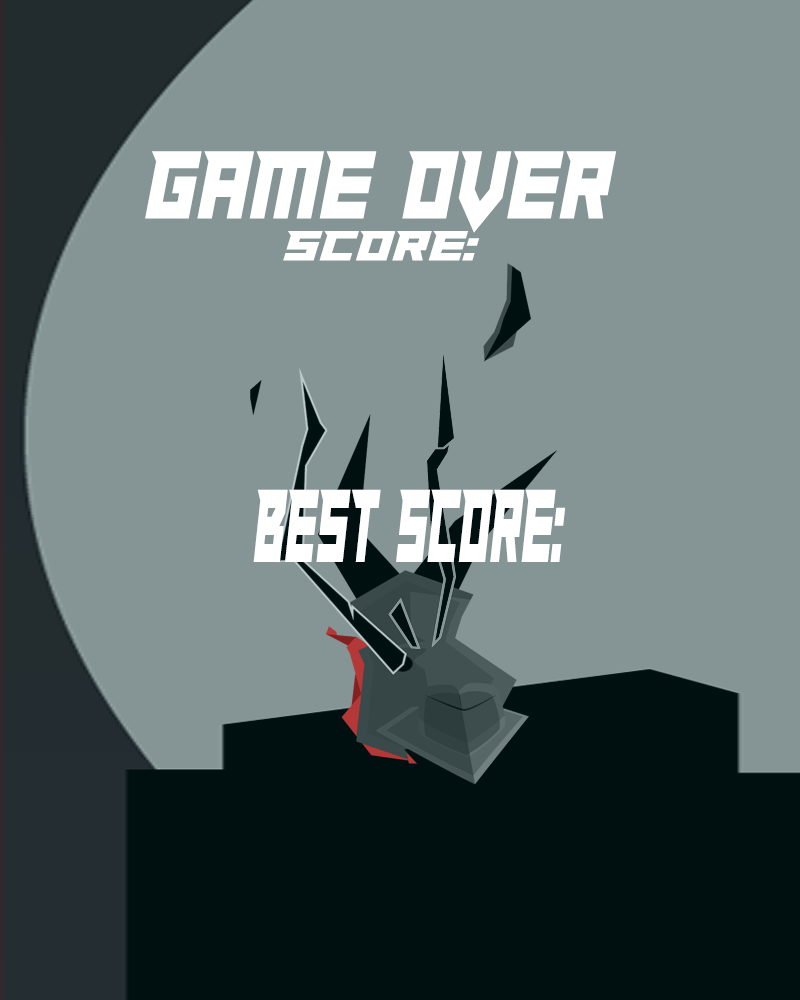
<style>
.page{position:relative;width:800px;height:1000px;background:#859595}
.page>*{position:absolute;margin:0}
.t1{font:103.7px "PaladinsCondensed";letter-spacing:0.01em;color:#ffffff;scale:0.63 1}
.t2{font:45.3px "PaladinsCondensed";letter-spacing:0.01em;color:#ffffff}
.t3{font:111.8px "PaladinsCondensed";letter-spacing:0.01em;color:#ffffff;scale:0.35 1}
</style>
<div class="page">
<p class="t1" style="left:145px;top:151px;width:472px;height:82px">GAME OVER</p>
<p class="t2" style="left:283px;top:231px;width:197px;height:30px">SCORE:</p>
<p class="t3" style="left:253px;top:489px;width:313px;height:73px">BEST SCORE:</p>
</div>
